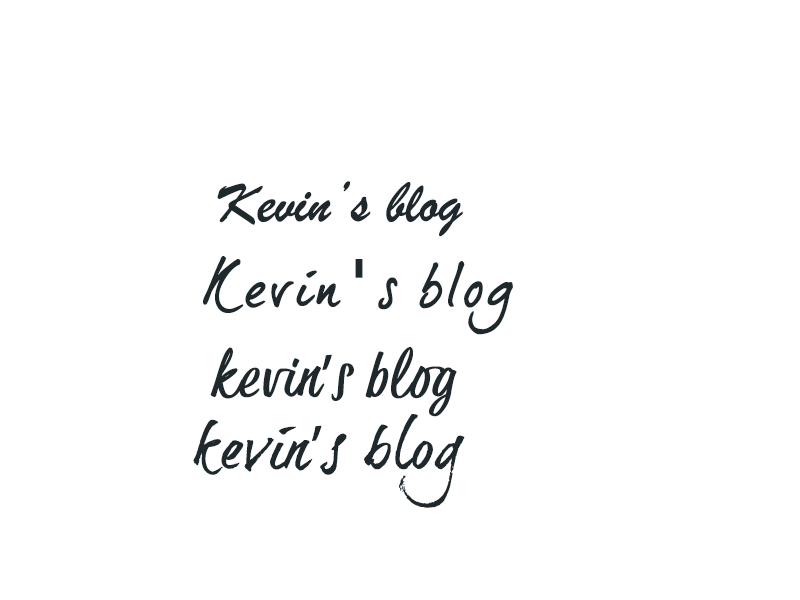
<style>
.page{position:relative;width:800px;height:600px;background:#ffffff}
.page>*{position:absolute;margin:0}
.t1{font:60px "BrushScriptMT";letter-spacing:-0.025em;color:#1f282d;font-weight:bold}
.t2{font:60px "DearJoe5CASUAL";letter-spacing:-0.025em;color:#1f282d;font-weight:bold}
.t3{font:60px "Menlo-Regular";letter-spacing:-0.025em;color:#1f282d;font-weight:bold}
.t4{font:60px "HessterMofetCLEAN_TRIAL";letter-spacing:-0.025em;color:#1f282d;font-weight:bold}
.t5{font:60px "MyriadPro-Regular";letter-spacing:-0.025em;color:#1f282d;font-weight:bold}
.t6{font:60px "BrushtipTravis";letter-spacing:-0.025em;color:#1f282d;font-weight:bold}
</style>
<div class="page">
<p class="t1" style="left:217px;top:181px;width:246px;height:56px">Kevin’s blog</p>
<p class="t2" style="left:203px;top:256px;width:310px;height:79px">Kevin<span class="t3">'</span>s blog</p>
<p class="t4" style="left:210px;top:347px;width:247px;height:70px">kevin<span class="t5">’</span>s blog</p>
<p class="t6" style="left:193px;top:414px;width:272px;height:94px">kevin<span class="t5">’</span>s blog</p>
</div>
